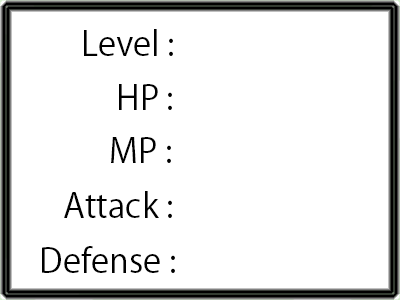
<style>
.page{position:relative;width:400px;height:300px;background:#ffffff}
.page>*{position:absolute;margin:0}
.t1{font:33.3px "KozGoPr6N-Regular";color:#000000}
</style>
<div class="page">
<p class="t1" style="left:84px;top:29px;width:89px;height:27px">Level :</p>
<p class="t1" style="left:119px;top:84px;width:53px;height:26px">HP :</p>
<p class="t1" style="left:111px;top:137px;width:60px;height:26px">MP :</p>
<p class="t1" style="left:64px;top:191px;width:108px;height:27px">Attack :</p>
<p class="t1" style="left:42px;top:246px;width:133px;height:27px">Defense :</p>
</div>
